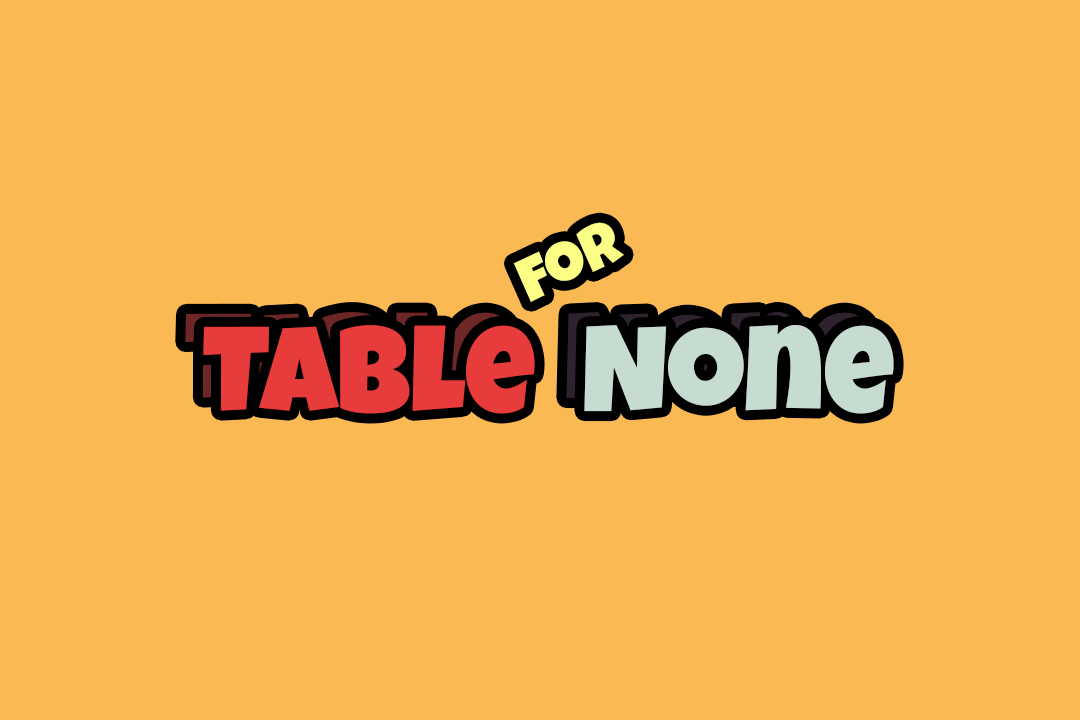
<style>
.page{position:relative;width:1080px;height:720px;background:#fbb954}
.page>*{position:absolute;margin:0}
.t1{font:61.7px "LuckiestGuy-Regular";color:#fbff86}
.t2{font:121.7px "LuckiestGuy-Regular";color:#e83b3b}
.t3{font:121.7px "LuckiestGuy-Regular";color:#c7dcd0}
</style>
<div class="page">
<p class="t1" style="left:513px;top:222px;width:111px;height:80px;rotate:-25deg">for</p>
<p class="t2" style="left:203px;top:325px;width:691px;height:89px">Table  <span class="t3">None</span></p>
</div>
